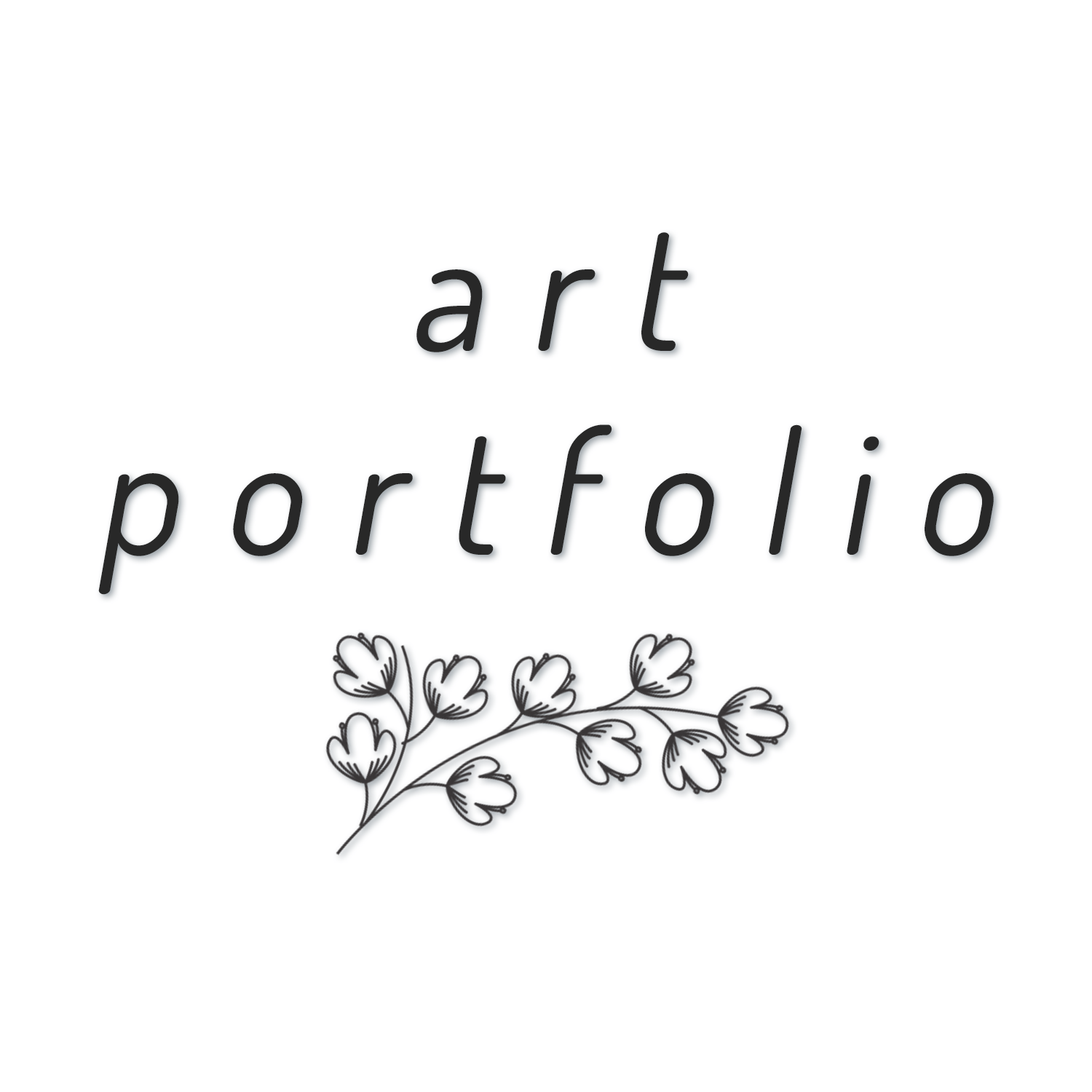
<style>
.page{position:relative;width:1092px;height:1092px;background:#ffffff}
.page>*{position:absolute;margin:0}
.t1{font:169.9px "Dosis-Regular";letter-spacing:0.26em;color:#282828;font-style:italic}
</style>
<div class="page">
<p class="t1" style="left:98px;top:232px;width:896px;height:363px;text-align:center">art<br>portfolio</p>
</div>
